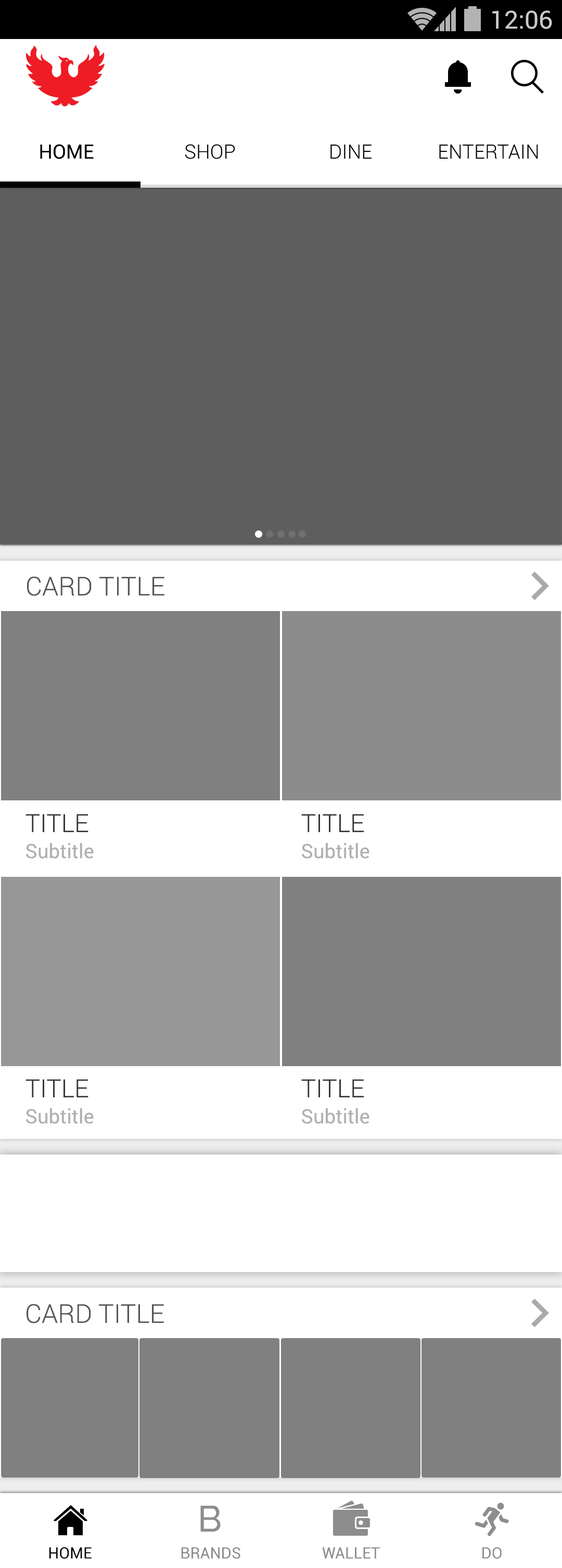
<style>
.page{position:relative;width:562px;height:1568px;background:#ffffff}
.page>*{position:absolute;margin:0}
.t1{font:25px "Roboto-Regular";color:#cbcbcb}
.t2{font:19.8px "Roboto-Regular";color:#000000}
.t3{font:19.8px "Roboto-Light";color:#000000}
.t4{font:26px "Roboto-Light";color:#555555}
.t5{font:25px "Roboto-Light";color:#363636}
.t6{font:19.8px "Roboto-Regular";color:#b0b0b0}
.t7{font:36.4px "Raleway-Medium";color:#8d8d8d}
.t8{font:15.6px "Roboto-Regular";color:#000000}
.t9{font:15.6px "Roboto-Regular";color:#8d8d8d}
</style>
<div class="page">
<p class="t1" style="left:492px;top:10px;width:60px;height:19px">12:06</p>
<p class="t2" style="left:40px;top:144px;width:54px;height:15px">HOME</p>
<p class="t3" style="left:185px;top:144px;width:50px;height:15px">SHOP</p>
<p class="t3" style="left:330px;top:145px;width:41px;height:14px">DINE</p>
<p class="t3" style="left:439px;top:145px;width:99px;height:14px">ENTERTAIN</p>
<p class="t4" style="left:27px;top:576px;width:137px;height:20px">CARD TITLE</p>
<p class="t5" style="left:25px;top:814px;width:63px;height:18px">TITLE</p>
<p class="t5" style="left:301px;top:814px;width:63px;height:18px">TITLE</p>
<p class="t6" style="left:26px;top:843px;width:68px;height:16px">Subtitle</p>
<p class="t6" style="left:302px;top:843px;width:67px;height:16px">Subtitle</p>
<p class="t5" style="left:25px;top:1079px;width:63px;height:18px">TITLE</p>
<p class="t5" style="left:301px;top:1079px;width:63px;height:18px">TITLE</p>
<p class="t6" style="left:26px;top:1108px;width:68px;height:16px">Subtitle</p>
<p class="t6" style="left:302px;top:1108px;width:67px;height:16px">Subtitle</p>
<p class="t4" style="left:27px;top:1304px;width:137px;height:20px">CARD TITLE</p>
<p class="t7" style="left:200px;top:1506px;width:21px;height:26px">B</p>
<p class="t8" style="left:49px;top:1547px;width:43px;height:12px">HOME</p>
<p class="t9" style="left:181px;top:1547px;width:59px;height:12px">BRANDS</p>
<p class="t9" style="left:322px;top:1547px;width:58px;height:12px">WALLET</p>
<p class="t9" style="left:482px;top:1547px;width:19px;height:12px">DO</p>
</div>
